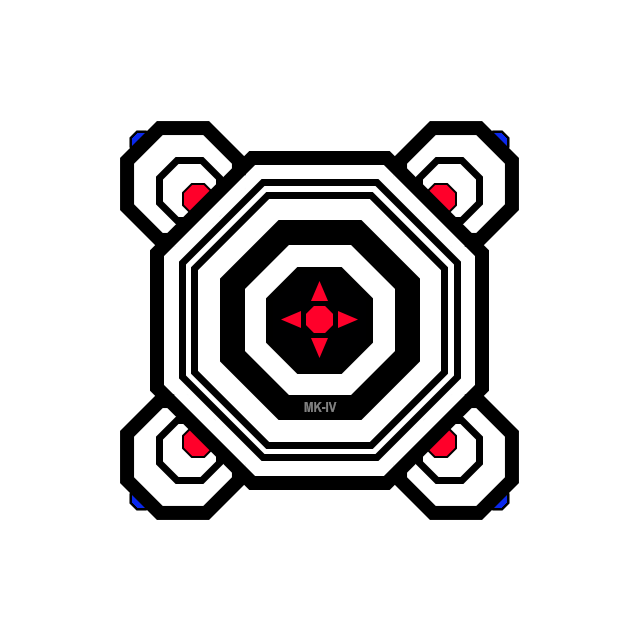
<style>
.page{position:relative;width:640px;height:640px;background:#ffffff}
.page>*{position:absolute;margin:0}
.t1{font:14px "ArialNarrow-Bold";color:#818181}
</style>
<div class="page">
<p class="t1" style="left:304px;top:402px;width:33px;height:10px">MK-IV</p>
</div>
